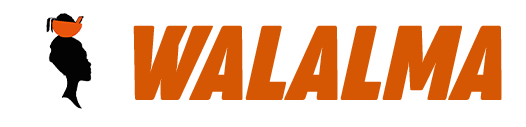
<style>
.page{position:relative;width:526px;height:127px;background:#ffffff}
.page>*{position:absolute;margin:0}
.t1{font:100px "CocogooseCompressedTrial-BoldIt";color:#d55703}
</style>
<div class="page">
<p class="t1" style="left:133px;top:25px;width:369px;height:75px">WALALMA</p>
</div>
